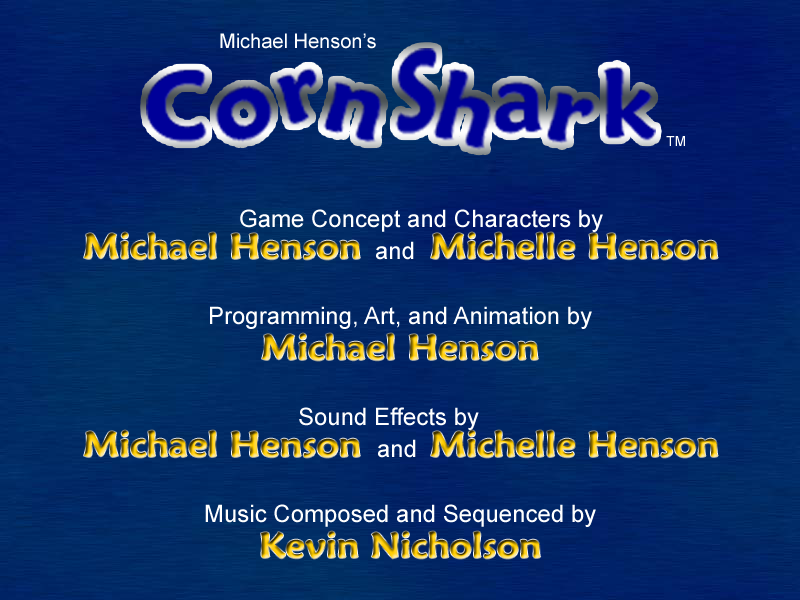
<style>
.page{position:relative;width:800px;height:600px}
.page>*{position:absolute;margin:0}
.t1{font:20px "ArialMT";color:#ffffff}
.t2{font:14px "ArialMT";color:#ffffff}
.t3{font:24px "ArialMT";color:#ffffff}
.t4{font:36px "MaiandraGD-DemiBold"}
</style>
<div class="page">
<p class="t1" style="left:220px;top:33px;width:156px;height:16px">Michael Henson’s</p>
<p class="t2" style="left:666px;top:136px;width:19px;height:10px">TM</p>
<p class="t3" style="left:240px;top:209px;width:363px;height:23px">Game Concept and Characters by</p>
<p class="t4" style="left:84px;top:232px;width:276px;height:28px">Michael Henson</p>
<p class="t4" style="left:431px;top:232px;width:287px;height:28px">Michelle Henson</p>
<p class="t3" style="left:376px;top:241px;width:38px;height:19px">and</p>
<p class="t3" style="left:210px;top:306px;width:382px;height:23px">Programming, Art, and Animation by</p>
<p class="t4" style="left:262px;top:333px;width:276px;height:28px">Michael Henson</p>
<p class="t3" style="left:299px;top:407px;width:180px;height:23px">Sound Effects by</p>
<p class="t4" style="left:84px;top:430px;width:276px;height:28px">Michael Henson</p>
<p class="t4" style="left:431px;top:430px;width:287px;height:28px">Michelle Henson</p>
<p class="t3" style="left:378px;top:439px;width:38px;height:19px">and</p>
<p class="t3" style="left:205px;top:504px;width:391px;height:23px">Music Composed and Sequenced by</p>
<p class="t4" style="left:261px;top:531px;width:280px;height:28px">Kevin Nicholson</p>
</div>
